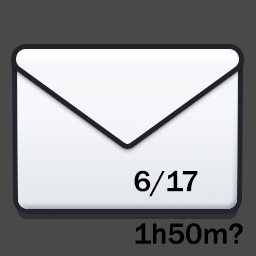
<style>
.page{position:relative;width:256px;height:256px;background:#494949}
.page>*{position:absolute;margin:0}
.t1{font:30px "FranklinGothic-Medium";color:#000000}
</style>
<div class="page">
<p class="t1" style="left:134px;top:170px;width:109px;height:74px">6/17<br>1h50m?</p>
</div>
